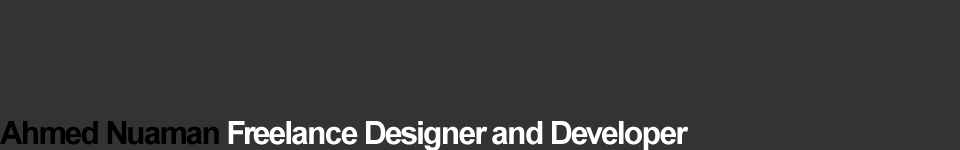
<style>
.page{position:relative;width:960px;height:150px;background:#333333}
.page>*{position:absolute;margin:0}
.t1{font:32px "Arial-BoldMT";letter-spacing:-0.063em;color:#ffffff}
.t2{font:32px "Arial-BoldMT";letter-spacing:-0.063em;color:#000000}
</style>
<div class="page">
<p class="t1" style="left:0px;top:121px;width:689px;height:30px"><span class="t2">Ahmed Nuaman </span>Freelance Designer and Developer</p>
</div>
